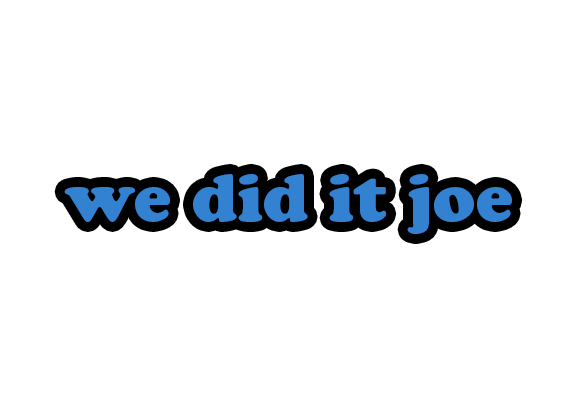
<style>
.page{position:relative;width:571px;height:408px;background:#ffffff}
.page>*{position:absolute;margin:0}
.t1{font:66.7px "CooperBlackStd";color:#3381d1}
</style>
<div class="page">
<p class="t1" style="left:64px;top:174px;width:448px;height:60px">we did it joe</p>
</div>
